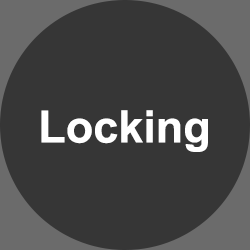
<style>
.page{position:relative;width:250px;height:250px;background:#363636}
.page>*{position:absolute;margin:0}
.t1{font:45px "Arial-BoldMT";color:#ffffff}
</style>
<div class="page">
<p class="t1" style="left:41px;top:110px;width:167px;height:42px">Locking</p>
</div>
